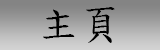
<style>
.page{position:relative;width:160px;height:50px}
.page>*{position:absolute;margin:0}
.t1{font:41.7px "DFKaiShu-SB-Estd-BF";color:#000000}
</style>
<div class="page">
<p class="t1" style="left:43px;top:7px;width:72px;height:36px">主頁</p>
</div>
